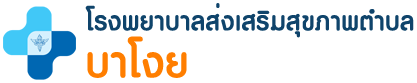
<style>
.page{position:relative;width:417px;height:83px;background:#ffffff}
.page>*{position:absolute;margin:0}
.t1{font:37.2px "PSLOmyimSP";letter-spacing:0.02em;color:#0f446b}
.t2{font:61.7px "PSLOmyimSP";letter-spacing:0.02em;color:#ff7e00}
</style>
<div class="page">
<p class="t1" style="left:85px;top:3px;width:329px;height:35px">โรงพยาบาลส่งเสริมสุขภาพตำบล</p>
<p class="t2" style="left:87px;top:36px;width:100px;height:42px">บาโงย</p>
</div>
